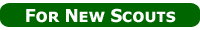
<style>
.page{position:relative;width:200px;height:30px;background:#006600}
.page>*{position:absolute;margin:0}
.t1{font:17.9px "TahomaSmallCap-Bold";color:#ffffff}
</style>
<div class="page">
<p class="t1" style="left:26px;top:8px;width:150px;height:15px">For New Scouts</p>
</div>
